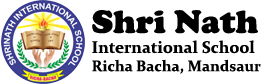
<style>
.page{position:relative;width:265px;height:84px;background:#ffffff}
.page>*{position:absolute;margin:0}
.t1{font:15.3px "Constantia-Bold";color:#000000}
.t2{font:33.3px "CooperBlack";color:#000000}
.t3{font:16.7px "Constantia-Bold";color:#000000}
</style>
<div class="page">
<p class="t1" style="left:92px;top:10px;width:169px;height:64px"><span class="t2">Shri Nath <br></span><span class="t3">International School<br></span>Richa Bacha, Mandsaur</p>
</div>
